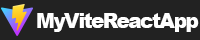
<style>
.page{position:relative;width:200px;height:40px;background:#222222}
.page>*{position:absolute;margin:0}
.t1{font:20px "Arial-Black";letter-spacing:-0.075em;color:#ffffff}
</style>
<div class="page">
<p class="t1" style="left:37px;top:13px;width:162px;height:19px">MyViteReactApp</p>
</div>
